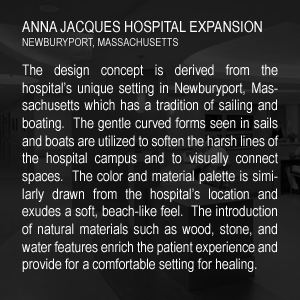
<style>
.page{position:relative;width:300px;height:300px}
.page>*{position:absolute;margin:0}
.t1{font:15.6px "ArialNarrow";color:#ffffff}
.t2{font:11.1px "ArialNarrow"}
.t3{font:14.7px "ArialNarrow";color:#ffffff}
</style>
<div class="page">
<p class="t1" style="left:22px;top:20px;width:240px;height:13px">ANNA JACQUES HOSPITAL EXPANSION</p>
<p class="t2" style="left:22px;top:38px;width:156px;height:10px">NEWBURYPORT, MASSACHUSETTS</p>
<p class="t3" style="left:22px;top:64px;width:257px;height:208px;text-align:justify">The design concept is derived from the hospital’s unique setting in Newburyport, Massachusetts which has a tradition of sailing and boating.  The gentle curved forms seen in sails and boats are utilized to soften the harsh lines of the hospital campus and to visually connect spaces.  The color and material palette is similarly drawn from the hospital’s location and exudes a soft, beach-like feel.  The introduction of natural materials such as wood, stone, and water features enrich the patient experience and provide for a comfortable setting for healing.</p>
</div>
